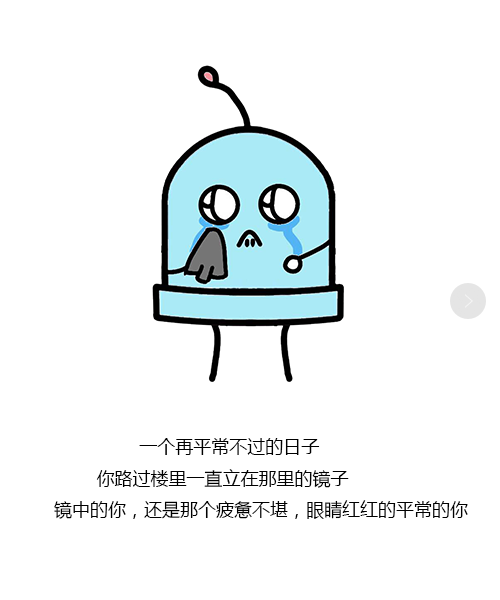
<style>
.page{position:relative;width:500px;height:600px;background:#ffffff}
.page>*{position:absolute;margin:0}
.t1{font:18px "MicrosoftYaHei";color:#000000}
</style>
<div class="page">
<p class="t1" style="left:54px;top:438px;width:414px;height:81px">一个再平常不过的日子<br>        你路过楼里一直立在那里的镜子<br>镜中的你，还是那个疲惫不堪，眼睛红红的平常的你</p>
</div>
